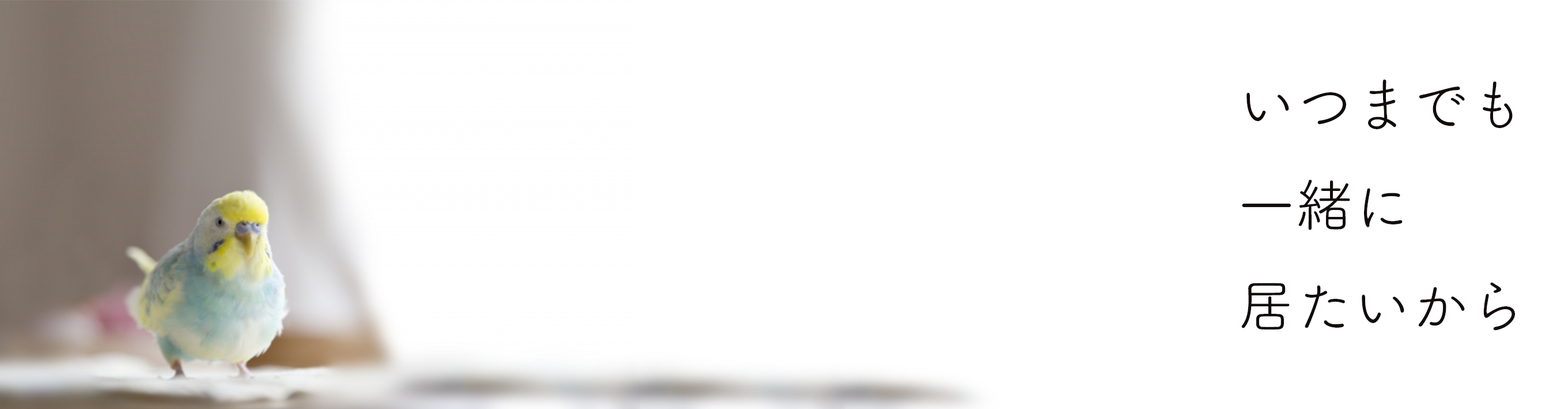
<style>
.page{position:relative;width:1568px;height:409px;background:#ffffff}
.page>*{position:absolute;margin:0}
.t1{font:57.6px "TsukuARdGothic-Regular";color:#120b0b}
</style>
<div class="page">
<p class="t1" style="left:1241px;top:80px;width:274px;height:250px">いつまでも<br>一緒に<br>居たいから</p>
</div>
